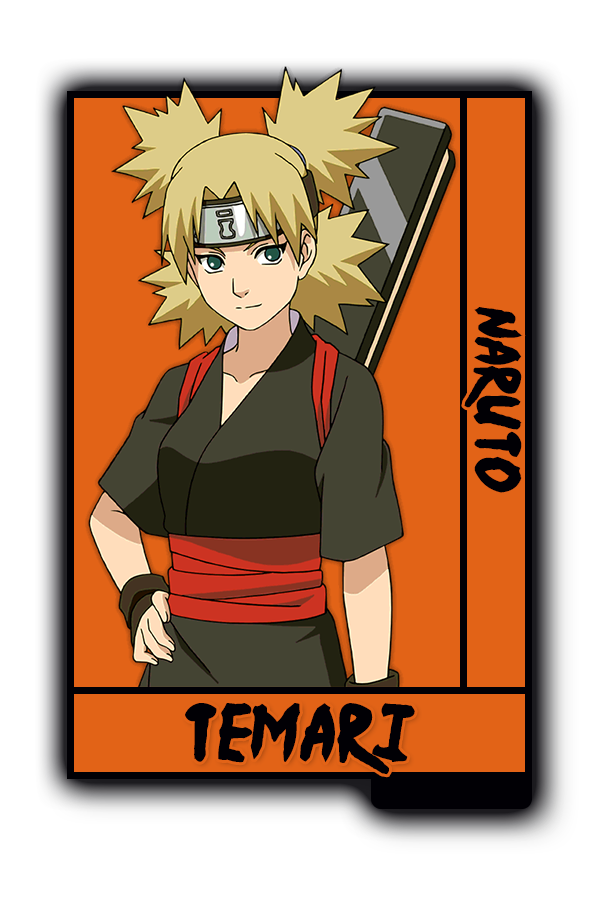
<style>
.page{position:relative;width:600px;height:900px;background:#e26317}
.page>*{position:absolute;margin:0}
.t1{font:52px "Ninja-Naruto";color:#010005}
.t2{font:65.2px "Ninja-Naruto";color:#010005}
</style>
<div class="page">
<p class="t1" style="left:464px;top:307px;width:59px;height:186px;rotate:90deg">Naruto</p>
<p class="t2" style="left:185px;top:703px;width:230px;height:72px">Temari</p>
</div>
